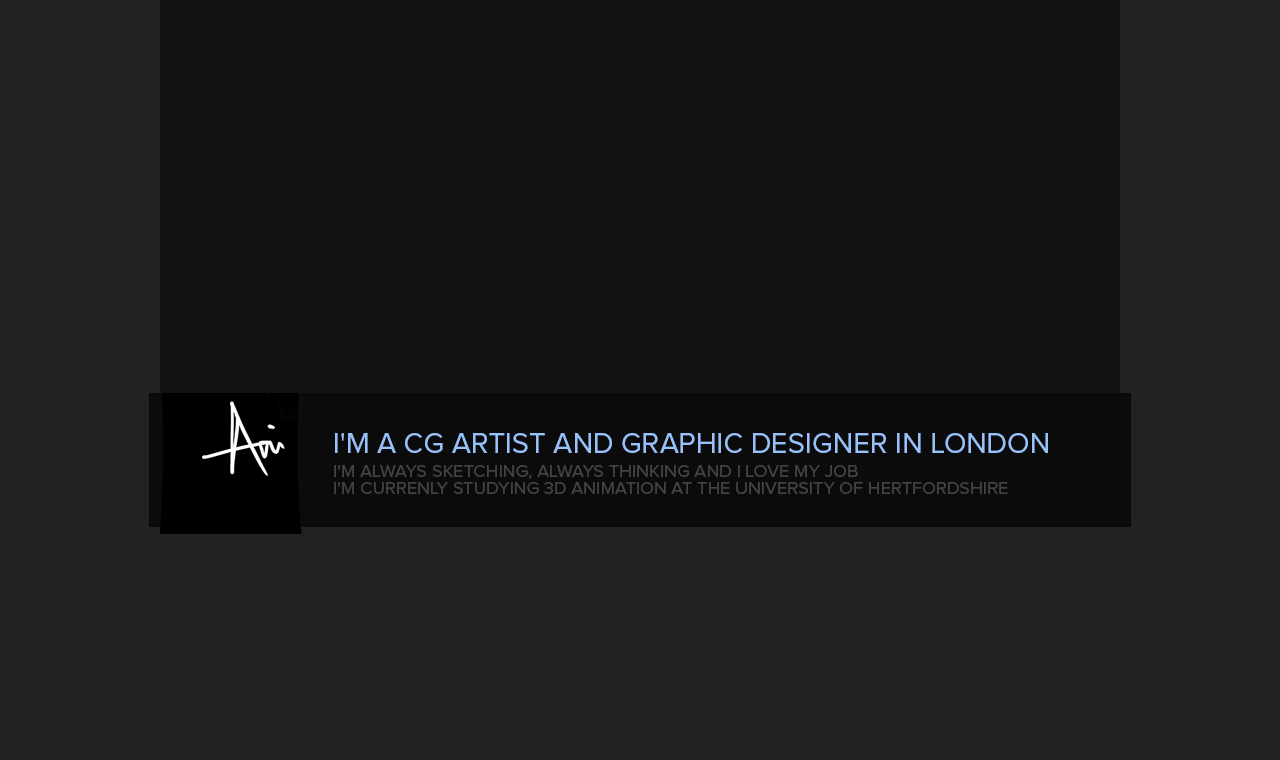
<style>
.page{position:relative;width:1280px;height:760px;background:#232121}
.page>*{position:absolute;margin:0}
.t1{font:18.1px/16.7px "ProximaNova-Regular";color:#414346;text-transform:uppercase}
.t2{font:29.2px/33.3px "ProximaNova-Regular";color:#98c1f9;text-transform:uppercase}
.t3{font:18.1px/23.6px "ProximaNova-Regular";color:#414346;text-transform:uppercase}
</style>
<div class="page">
<p class="t1" style="left:334px;top:433px;width:714px;height:61px"><span class="t2">I'm a CG Artist and Graphic Designer in London<br></span><span class="t3">I'm always sketching, always thinking and I love my Job<br></span>I'm currenly studying 3d Animation at the University of Hertfordshire</p>
</div>
